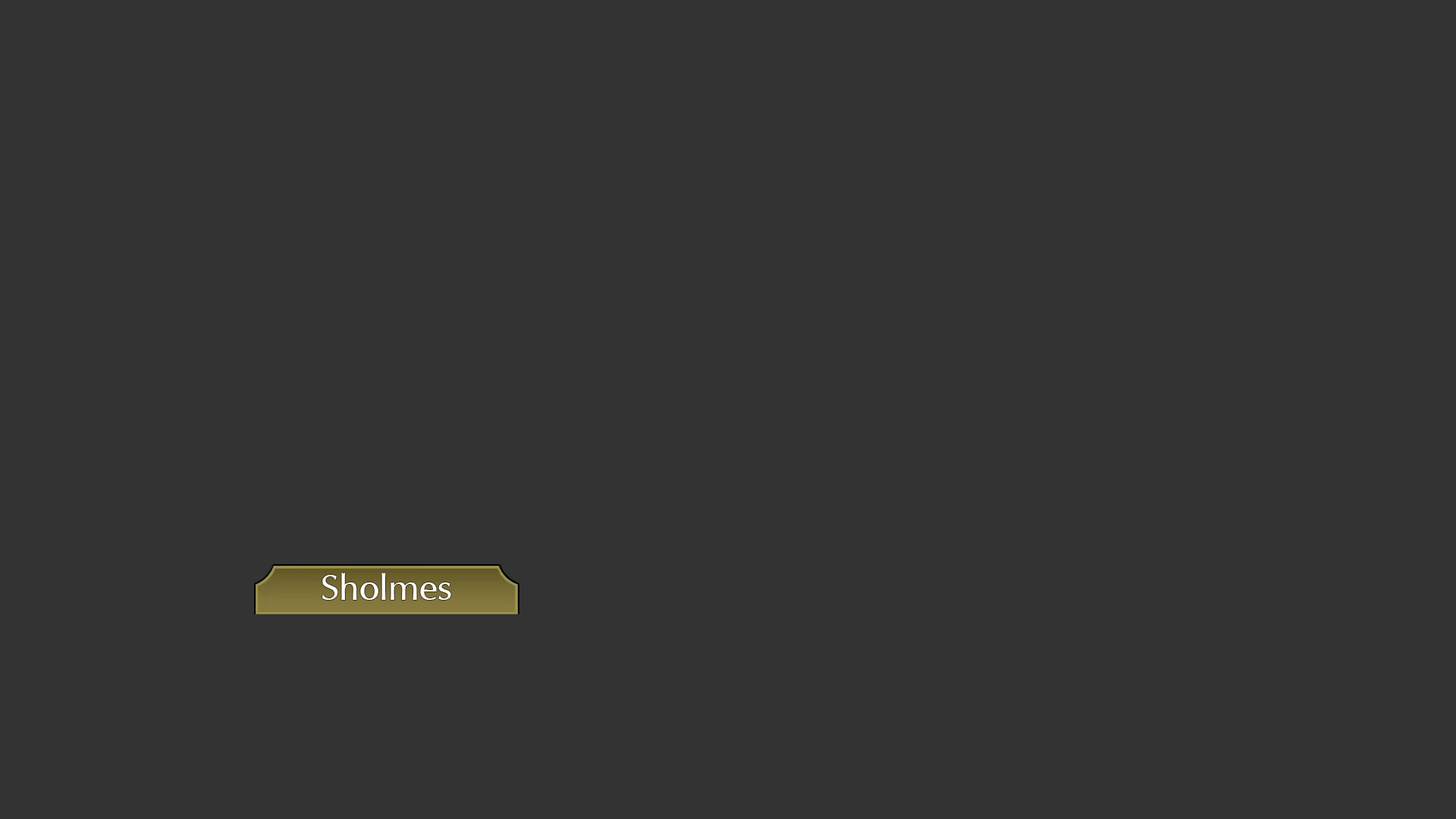
<style>
.page{position:relative;width:1456px;height:819px;background:#333333}
.page>*{position:absolute;margin:0}
.t1{font:36.4px "MgOpenCosmetica";color:#fffdf7}
</style>
<div class="page">
<p class="t1" style="left:322px;top:573px;width:129px;height:27px">Sholmes</p>
</div>
